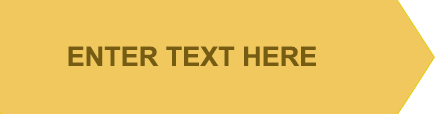
<style>
.page{position:relative;width:435px;height:114px;background:#f0c85e}
.page>*{position:absolute;margin:0}
.t1{font:27px "Arial-BoldMT";color:#765b13}
</style>
<div class="page">
<p class="t1" style="left:68px;top:46px;width:248px;height:20px">ENTER TEXT HERE</p>
</div>
